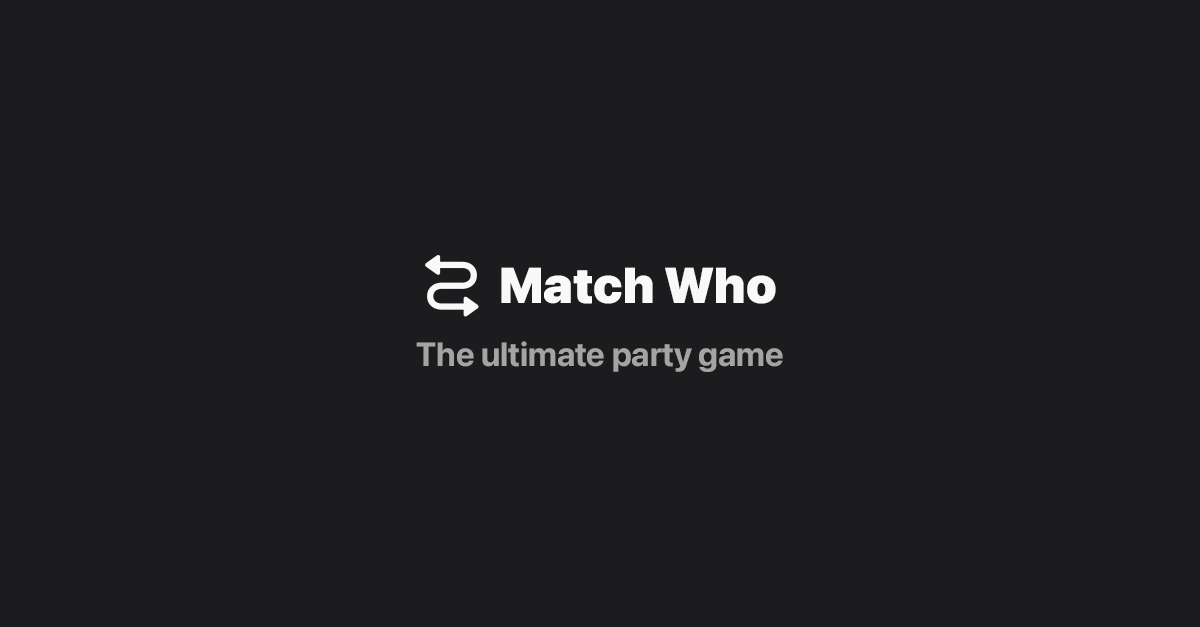
<style>
.page{position:relative;width:1200px;height:627px;background:#1c1c1e}
.page>*{position:absolute;margin:0}
.t1{font:50px "SFProDisplay-Black";color:#f9f9f9}
.t2{font:33.3px "SFProDisplay-Bold";color:#a4a4a5}
</style>
<div class="page">
<p class="t1" style="left:501px;top:267px;width:275px;height:37px">Match Who</p>
<p class="t2" style="left:416px;top:341px;width:367px;height:31px">The ultimate party game</p>
</div>
